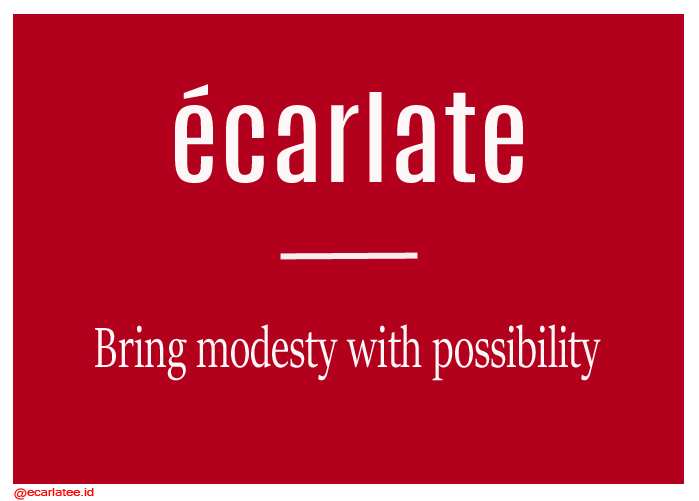
<style>
.page{position:relative;width:699px;height:501px;background:#b3001d}
.page>*{position:absolute;margin:0}
.t1{font:102.6px "Antonio-Regular";color:#fdf7f8;scale:1.15 1}
.t2{font:63.5px "SitkaBanner";color:#fdf7f8;scale:0.69 1}
.t3{font:11.2px "Mangal";color:#fc0505;scale:1.12 1}
</style>
<div class="page">
<p class="t1" style="left:175px;top:84px;width:348px;height:99px">écarlate</p>
<p class="t2" style="left:95px;top:324px;width:506px;height:57px">Bring modesty with possibility</p>
<p class="t3" style="left:14px;top:488px;width:80px;height:12px">@ecarlatee.id</p>
</div>
